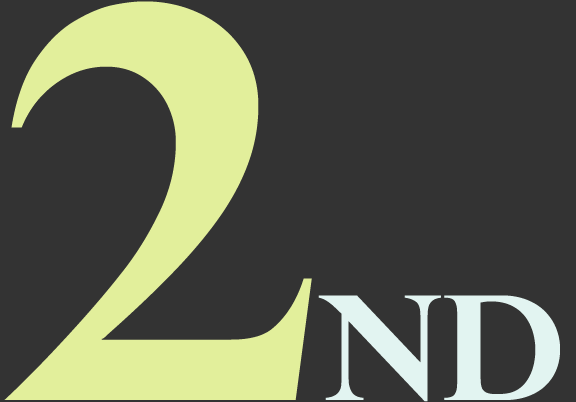
<style>
.page{position:relative;width:576px;height:402px;background:#333333}
.page>*{position:absolute;margin:0}
.t1{font:145.3px "PerpetuaTitlingMT-Bold";color:#e2ef9b}
.t2{font:549.1px "PerpetuaTitlingMT-Bold";color:#e2ef9b}
</style>
<div class="page">
<p class="t1" style="left:4px;top:1px;width:556px;height:401px"><span class="t2">2</span>nd</p>
</div>
